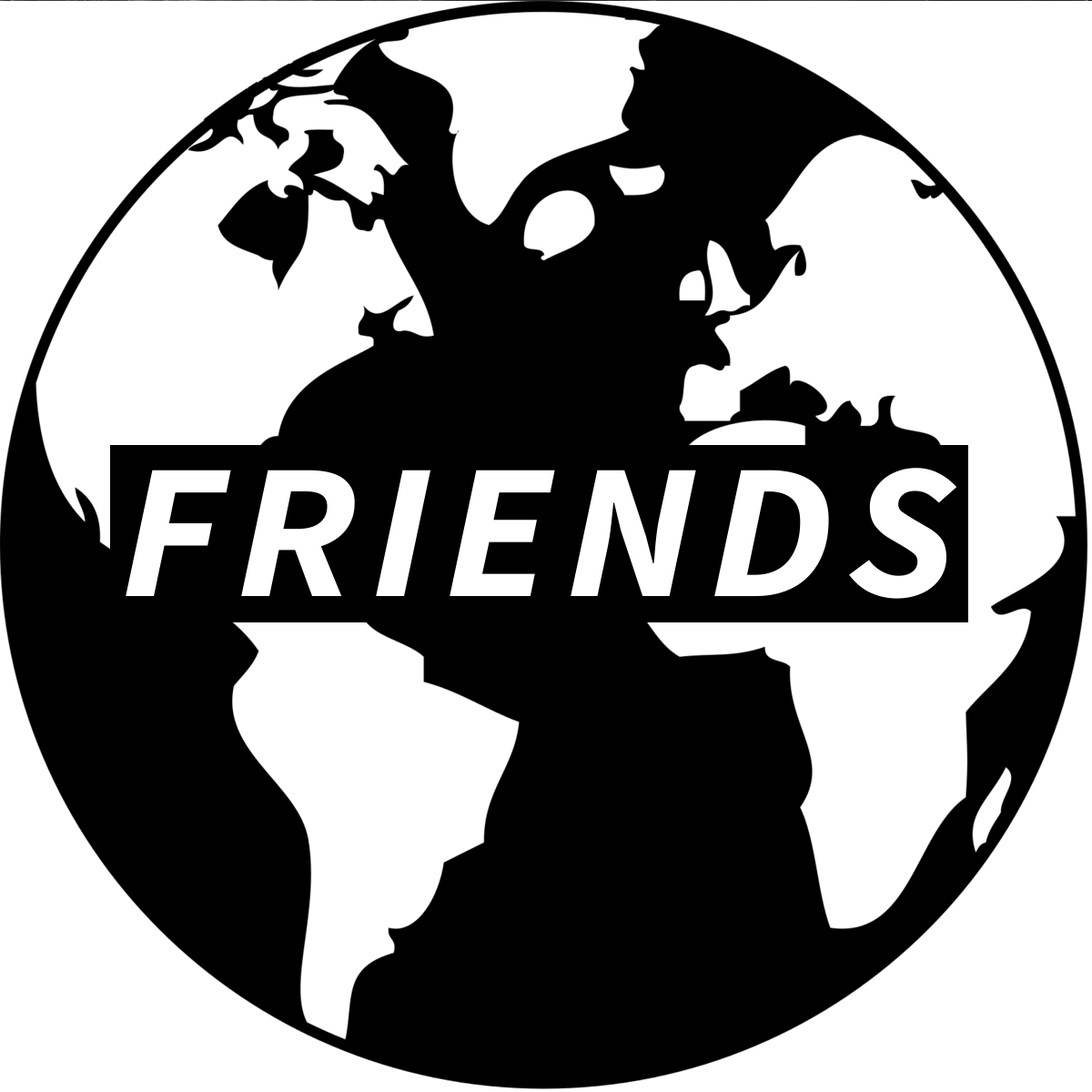
<style>
.page{position:relative;width:1092px;height:1092px;background:#ffffff}
.page>*{position:absolute;margin:0}
.t1{font:192.8px "SourceSansPro-BoldIt";letter-spacing:0.068em;color:#ffffff;scale:1.05 1}
</style>
<div class="page">
<p class="t1" style="left:126px;top:467px;width:831px;height:131px">FRIENDS</p>
</div>
